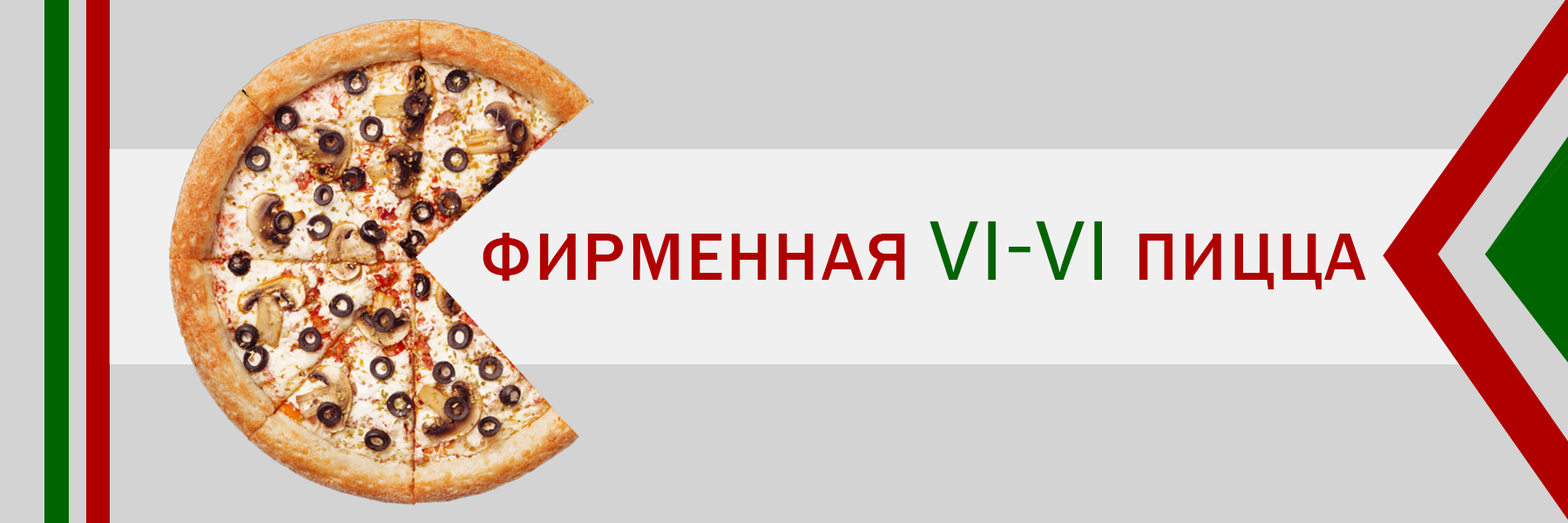
<style>
.page{position:relative;width:1568px;height:523px;background:#d3d3d3}
.page>*{position:absolute;margin:0}
.t1{font:69.7px "FranklinGothic-Medium";letter-spacing:0.04em;color:#b00000;text-transform:uppercase}
.t2{font:87.1px "MyriadPro-Regular";letter-spacing:0.04em;color:#006400;text-transform:uppercase}
</style>
<div class="page">
<p class="t1" style="left:483px;top:221px;width:883px;height:68px">ФИРМЕННАЯ <span class="t2">VI-VI </span>ПИЦЦА</p>
</div>
